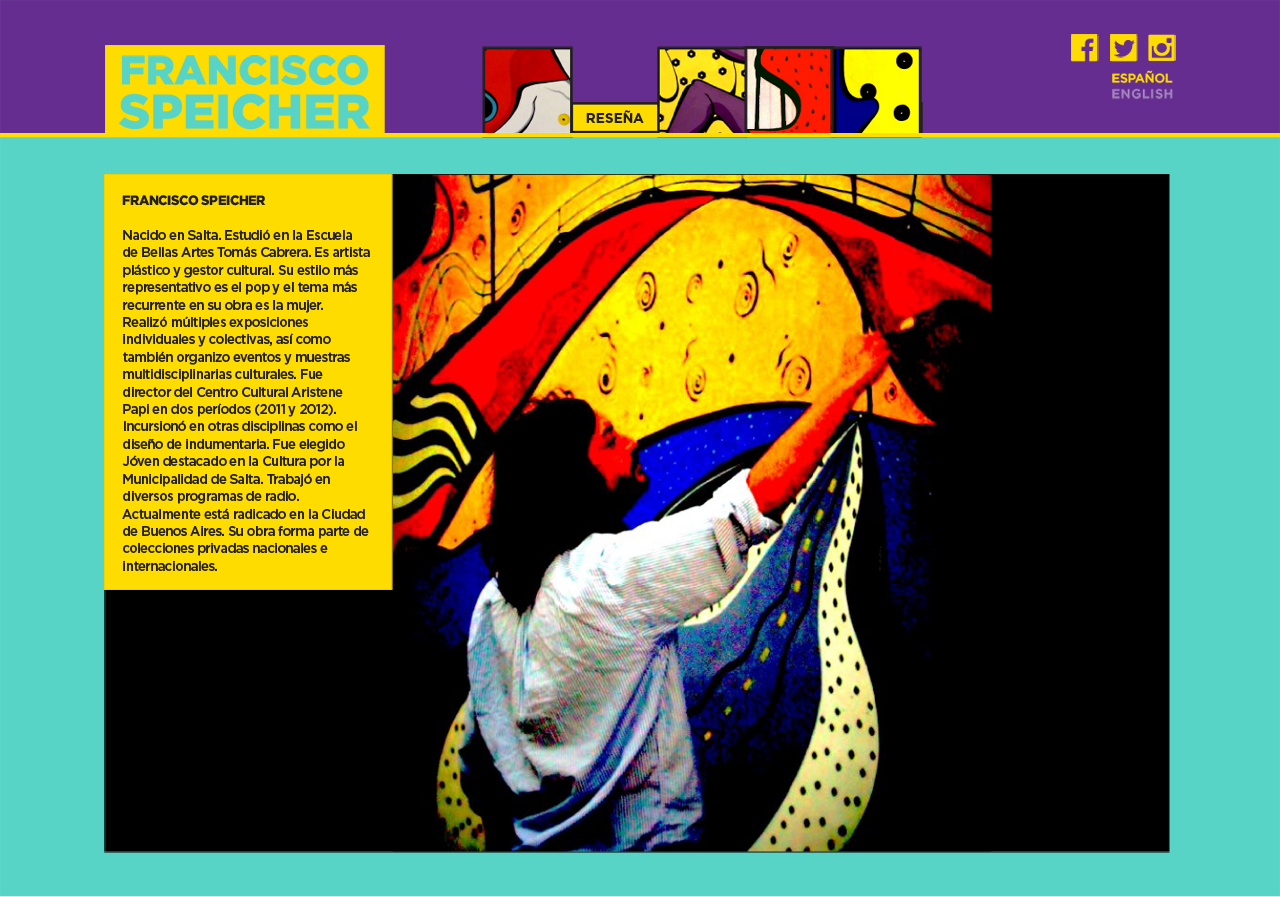
<style>
.page{position:relative;width:1280px;height:897px;background:#000000}
.page>*{position:absolute;margin:0}
.t1{font:13.7px "GothamBold";color:#231f20}
.t2{font:13.7px/17.4px "GothamMedium";letter-spacing:-0.036em;color:#231f20;scale:0.95 1}
.t3{font:13.7px/17.4px "Gotham-Black";letter-spacing:-0.036em;color:#231f20;scale:0.95 1}
</style>
<div class="page">
<p class="t1" style="left:586px;top:110px;width:58px;height:13px">RESEÑA</p>
<p class="t2" style="left:122px;top:195px;width:248px;height:376px"><span class="t3">FRANCISCO SPEICHER<br></span><br>Nacido en Salta. Estudió en la Escuela de Bellas Artes Tomás Cabrera. Es artista plástico y gestor cultural. Su estilo más representativo es el pop y el tema más recurrente en su obra es la mujer. Realizó múltiples exposiciones individuales y colectivas, así como también organizo eventos y muestras multidisciplinarias culturales. Fue director del Centro Cultural Aristene Papi en dos períodos (2011 y 2012). Incursionó en otras disciplinas como el diseño de indumentaria. Fue elegido Jóven destacado en la Cultura por la Municipalidad de Salta. Trabajó en diversos programas de radio. Actualmente está radicado en la Ciudad de Buenos Aires. Su obra forma parte de colecciones privadas nacionales e internacionales.</p>
</div>
